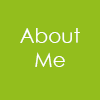
<style>
.page{position:relative;width:100px;height:100px;background:#93be1d}
.page>*{position:absolute;margin:0}
.t1{font:20px/24px "STXihei";color:#ffffff}
</style>
<div class="page">
<p class="t1" style="left:20px;top:28px;width:60px;height:40px;text-align:center">About<br>Me</p>
</div>
